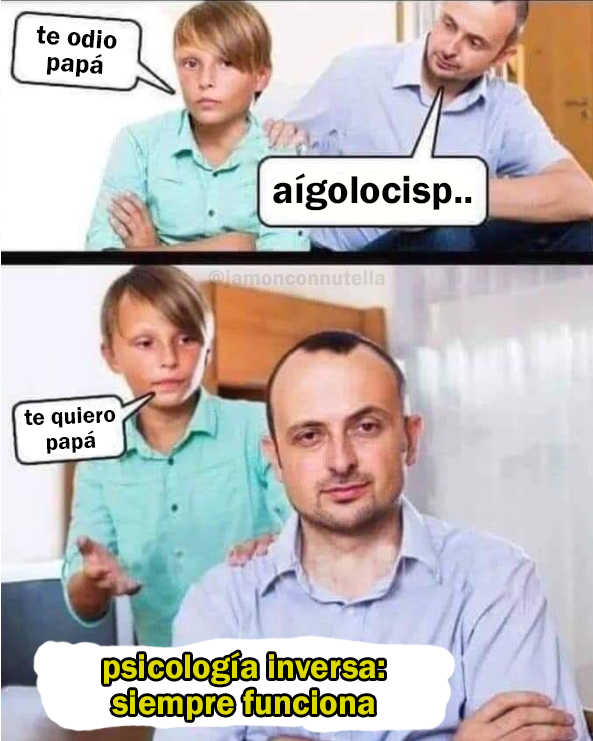
<style>
.page{position:relative;width:593px;height:741px}
.page>*{position:absolute;margin:0}
.t1{font:26.8px "FranklinGothic-Demi";color:#000000}
.t2{font:40.3px "FranklinGothic-Demi";color:#000000}
.t3{font:21.9px "FranklinGothic-Demi";color:#d1c8c7}
.t4{font:23.5px "FranklinGothic-Demi";color:#000000}
.t5{font:34.8px "FranklinGothic-Demi";color:#dcd900}
</style>
<div class="page">
<p class="t1" style="left:36px;top:26px;width:81px;height:51px;text-align:center;rotate:4deg">te odio<br>papá</p>
<p class="t2" style="left:273px;top:173px;width:199px;height:38px">aígolocisp..</p>
<p class="t3" style="left:208px;top:270px;width:177px;height:19px">@jamonconnutella</p>
<p class="t4" style="left:24px;top:406px;width:92px;height:48px;text-align:center;rotate:-2deg">te quiero<br>papá</p>
<p class="t5" style="left:104px;top:652px;width:280px;height:68px;text-align:center">psicología inversa:<br>siempre funciona</p>
</div>
